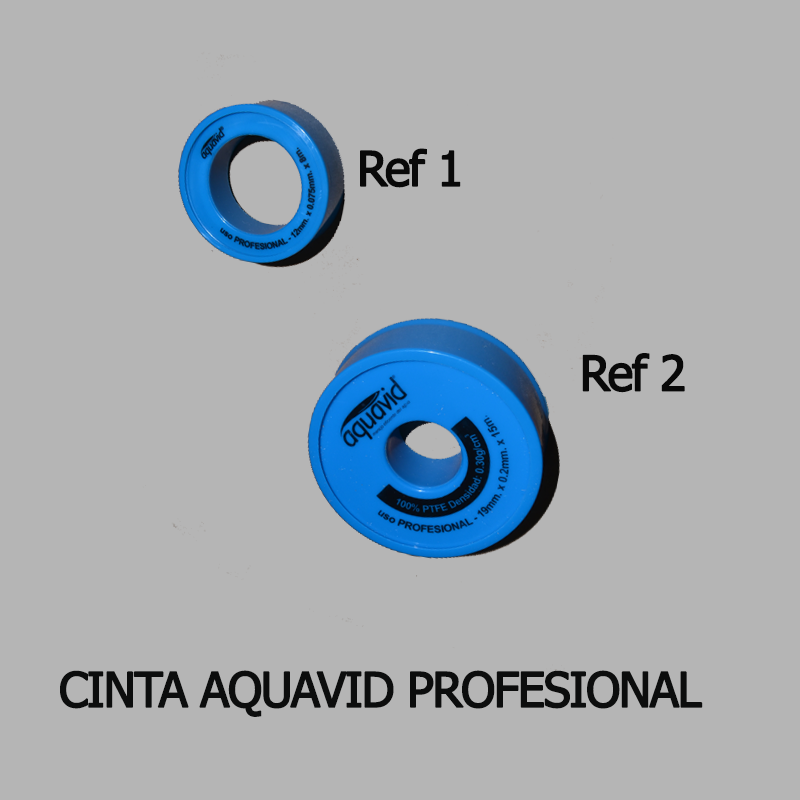
<style>
.page{position:relative;width:800px;height:800px;background:#b5b5b5}
.page>*{position:absolute;margin:0}
.t1{font:48px "Tahoma";letter-spacing:-0.05em;color:#090909;font-weight:bold}
.t2{font:48.3px "Tahoma";letter-spacing:-0.05em;color:#090909;font-weight:bold}
.t3{font:48px "Tahoma";letter-spacing:-0.05em;color:#0c0d0d;font-weight:bold}
</style>
<div class="page">
<p class="t1" style="left:360px;top:148px;width:101px;height:40px">Ref 1</p>
<p class="t2" style="left:582px;top:353px;width:103px;height:40px">Ref 2</p>
<p class="t3" style="left:60px;top:670px;width:643px;height:47px">CINTA AQUAVID PROFESIONAL</p>
</div>
